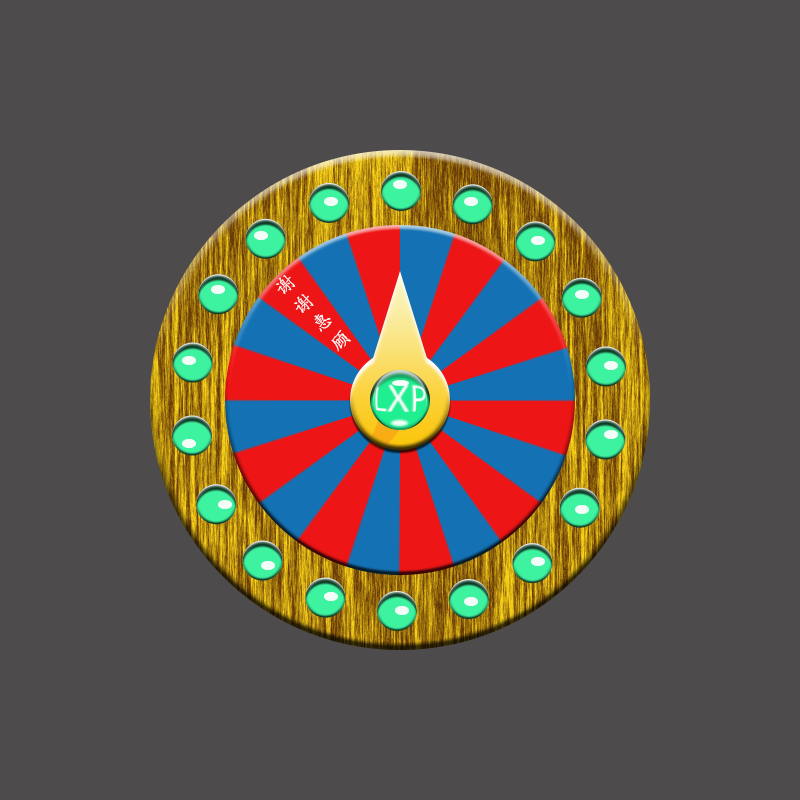
<style>
.page{position:relative;width:800px;height:800px;background:#4d4b4b}
.page>*{position:absolute;margin:0}
.t1{font:20px "STKaiti";color:#fdfbfb}
</style>
<div class="page">
<p class="t1" style="left:275px;top:275px;width:76px;height:77px;rotate:-45deg">谢谢惠顾</p>
</div>
